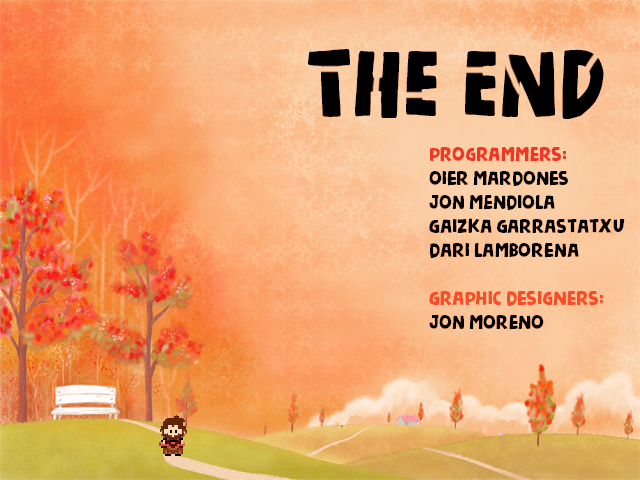
<style>
.page{position:relative;width:640px;height:480px}
.page>*{position:absolute;margin:0}
.t1{font:20px "NicknameDEMO";color:#000000}
.t2{font:20px "NicknameDEMO";color:#e72222}
.t3{font:20px "NicknameDEMO";color:#f13625}
</style>
<div class="page">
<p class="t1" style="left:429px;top:147px;width:196px;height:183px"><span class="t2">programmers:<br></span>oier mardones<br>jon mendiola<br>gaizka garrastatxu<br>dari lamborena<br><br><span class="t3">graphic designers:<br></span>jon moreno</p>
</div>
